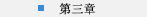
<style>
.page{position:relative;width:147px;height:17px;background:#f1f1f1}
.page>*{position:absolute;margin:0}
.t1{font:12px "SimSun";color:#000000;font-weight:bold}
</style>
<div class="page">
<p class="t1" style="left:39px;top:0px;width:77px;height:18px">第三章</p>
</div>
